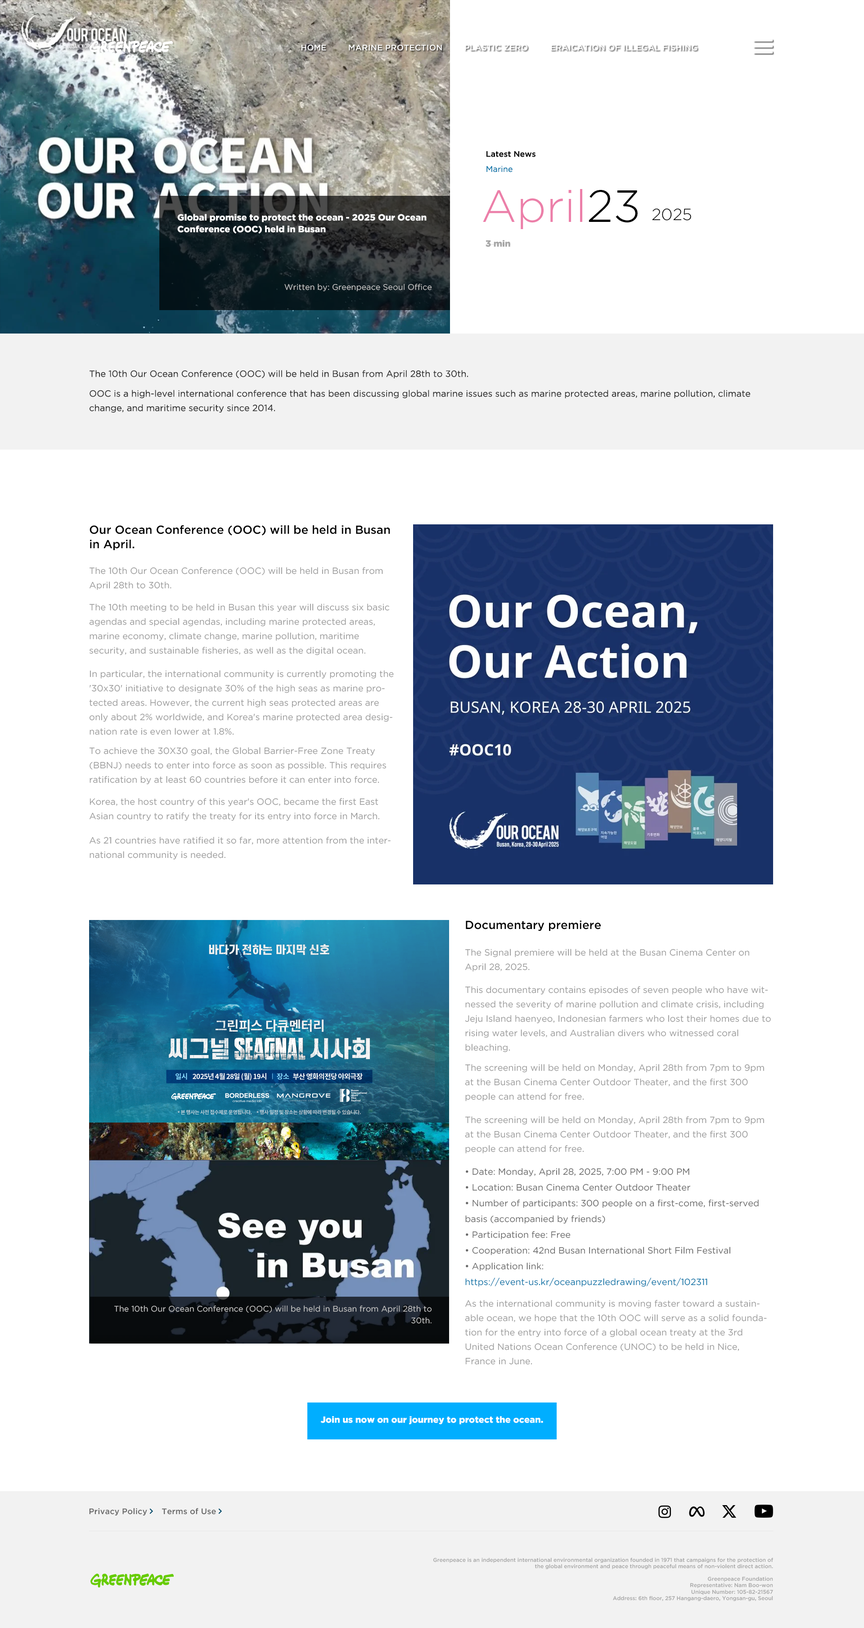
<style>
.page{position:relative;width:864px;height:1628px;background:#ffffff}
.page>*{position:absolute;margin:0}
.t1{font:8.1px "GothamPro-Medium";color:#ffffff}
.t2{font:8.1px "GothamPro-Medium";color:#ffffff;text-transform:uppercase}
.t3{font:8.1px "GothamPro-Medium";color:#000000}
.t4{font:8.1px "GothamPro";color:#0071a6}
.t5{font:45px "GothamPro-Light";color:#ec7fa9}
.t6{font:45px "GothamPro-Light";color:#000000}
.t7{font:16.2px "GothamPro-Light";color:#000000}
.t8{font:9px/11.7px "GothamPro-Black";color:#ffffff}
.t9{font:9px "GothamPro-Black";color:#a6a6a6}
.t10{font:8.1px "GothamPro";color:#c4c4c4}
.t11{font:9px "GothamPro";color:#333333}
.t12{font:9px/14.4px "GothamPro";color:#333333}
.t13{font:11.7px/14.4px "GothamPro-Medium";color:#000000}
.t14{font:9px/14.4px "GothamPro";color:#999999}
.t15{font:11.7px "GothamPro-Medium";color:#000000}
.t16{font:9px/15.8px "GothamPro";color:#666666}
.t17{font:9px/15.8px "GothamPro";color:#0071a6}
.t18{font:8.1px/11.7px "GothamPro";color:#c4c4c4}
.t19{font:9px "GothamPro-Black";color:#ffffff}
.t20{font:8.1px "GothamPro-Medium";letter-spacing:0.01em;color:#666666}
.t21{font:5.4px "GothamPro-Medium";color:#a6a6a6}
</style>
<div class="page">
<p class="t1" style="left:302px;top:45px;width:24px;height:6px">HOME</p>
<p class="t2" style="left:349px;top:45px;width:93px;height:6px">Marine protection</p>
<p class="t2" style="left:465px;top:45px;width:63px;height:6px">Plastic Zero</p>
<p class="t2" style="left:551px;top:45px;width:147px;height:6px">Eraication of illegal fishing</p>
<p class="t3" style="left:486px;top:151px;width:50px;height:6px">Latest News</p>
<p class="t4" style="left:486px;top:166px;width:27px;height:6px">Marine</p>
<p class="t5" style="left:483px;top:189px;width:155px;height:40px">April<span class="t6">23</span></p>
<p class="t7" style="left:652px;top:208px;width:39px;height:12px">2025</p>
<p class="t8" style="left:177px;top:214px;width:250px;height:20px">Global promise to protect the ocean - 2025 Our Ocean Conference (OOC) held in Busan</p>
<p class="t9" style="left:485px;top:240px;width:26px;height:7px">3 min</p>
<p class="t10" style="left:284px;top:284px;width:148px;height:8px">Written by: Greenpeace Seoul Office</p>
<p class="t11" style="left:90px;top:370px;width:378px;height:8px">The 10th Our Ocean Conference (OOC) will be held in Busan from April 28th to 30th.</p>
<p class="t12" style="left:90px;top:390px;width:661px;height:23px">OOC is a high-level international conference that has been discussing global marine issues such as marine protected areas, marine pollution, climate change, and maritime security since 2014.</p>
<p class="t13" style="left:90px;top:525px;width:300px;height:25px">Our Ocean Conference (OOC) will be held in Busan in April.</p>
<p class="t14" style="left:89px;top:567px;width:294px;height:23px">The 10th Our Ocean Conference (OOC) will be held in Busan from April 28th to 30th.</p>
<p class="t14" style="left:89px;top:603px;width:300px;height:52px">The 10th meeting to be held in Busan this year will discuss six basic agendas and special agendas, including marine protected areas, marine economy, climate change, marine pollution, maritime security, and sustainable fisheries, as well as the digital ocean.</p>
<p class="t14" style="left:89px;top:670px;width:305px;height:65px">In particular, the international community is currently promoting the '30x30' initiative to designate 30% of the high seas as marine protected areas. However, the current high seas protected areas are only about 2% worldwide, and Korea's marine protected area designation rate is even lower at 1.8%.</p>
<p class="t14" style="left:89px;top:747px;width:297px;height:37px">To achieve the 30X30 goal, the Global Barrier-Free Zone Treaty (BBNJ) needs to enter into force as soon as possible. This requires ratification by at least 60 countries before it can enter into force.</p>
<p class="t14" style="left:89px;top:798px;width:290px;height:23px">Korea, the host country of this year's OOC, became the first East Asian country to ratify the treaty for its entry into force in March.</p>
<p class="t14" style="left:89px;top:837px;width:302px;height:23px">As 21 countries have ratified it so far, more attention from the international community is needed.</p>
<p class="t15" style="left:466px;top:920px;width:135px;height:11px">Documentary premiere</p>
<p class="t14" style="left:465px;top:949px;width:284px;height:23px">The Signal premiere will be held at the Busan Cinema Center on April 28, 2025.</p>
<p class="t14" style="left:465px;top:986px;width:306px;height:66px">This documentary contains episodes of seven people who have witnessed the severity of marine pollution and climate crisis, including Jeju Island haenyeo, Indonesian farmers who lost their homes due to rising water levels, and Australian divers who witnessed coral bleaching.</p>
<p class="t14" style="left:465px;top:1064px;width:299px;height:37px">The screening will be held on Monday, April 28th from 7pm to 9pm at the Busan Cinema Center Outdoor Theater, and the first 300 people can attend for free.</p>
<p class="t14" style="left:465px;top:1116px;width:299px;height:37px">The screening will be held on Monday, April 28th from 7pm to 9pm at the Busan Cinema Center Outdoor Theater, and the first 300 people can attend for free.</p>
<p class="t16" style="left:465px;top:1168px;width:294px;height:119px">• Date: Monday, April 28, 2025, 7:00 PM - 9:00 PM<br>• Location: Busan Cinema Center Outdoor Theater<br>• Number of participants: 300 people on a first-come, first-served basis (accompanied by friends)<br>• Participation fee: Free<br>• Cooperation: 42nd Busan International Short Film Festival<br>• Application link: <br><span class="t17">https://event-us.kr/oceanpuzzledrawing/event/102311</span></p>
<p class="t14" style="left:465px;top:1300px;width:302px;height:64px">As the international community is moving faster toward a sustainable ocean, we hope that the 10th OOC will serve as a solid foundation for the entry into force of a global ocean treaty at the 3rd United Nations Ocean Conference (UNOC) to be held in Nice, France in June.</p>
<p class="t18" style="left:114px;top:1305px;width:318px;height:18px;text-align:right">The 10th Our Ocean Conference (OOC) will be held in Busan from April 28th to 30th.</p>
<p class="t19" style="left:320px;top:1416px;width:223px;height:8px">Join us now on our journey to protect the ocean.</p>
<p class="t20" style="left:89px;top:1508px;width:58px;height:7px">Privacy Policy</p>
<p class="t20" style="left:162px;top:1508px;width:54px;height:6px">Terms of Use</p>
<p class="t21" style="left:433px;top:1557px;width:340px;height:12px;text-align:right">Greenpeace is an independent international environmental organization founded in 1971 that campaigns for the protection of the global environment and peace through peaceful means of non-violent direct action.</p>
<p class="t21" style="left:613px;top:1576px;width:160px;height:25px;text-align:right">Greenpeace Foundation<br>Representative: Nam Boo-won<br>Unique Number: 105-82-21567<br>Address: 6th floor, 257 Hangang-daero, Yongsan-gu, Seoul</p>
</div>
